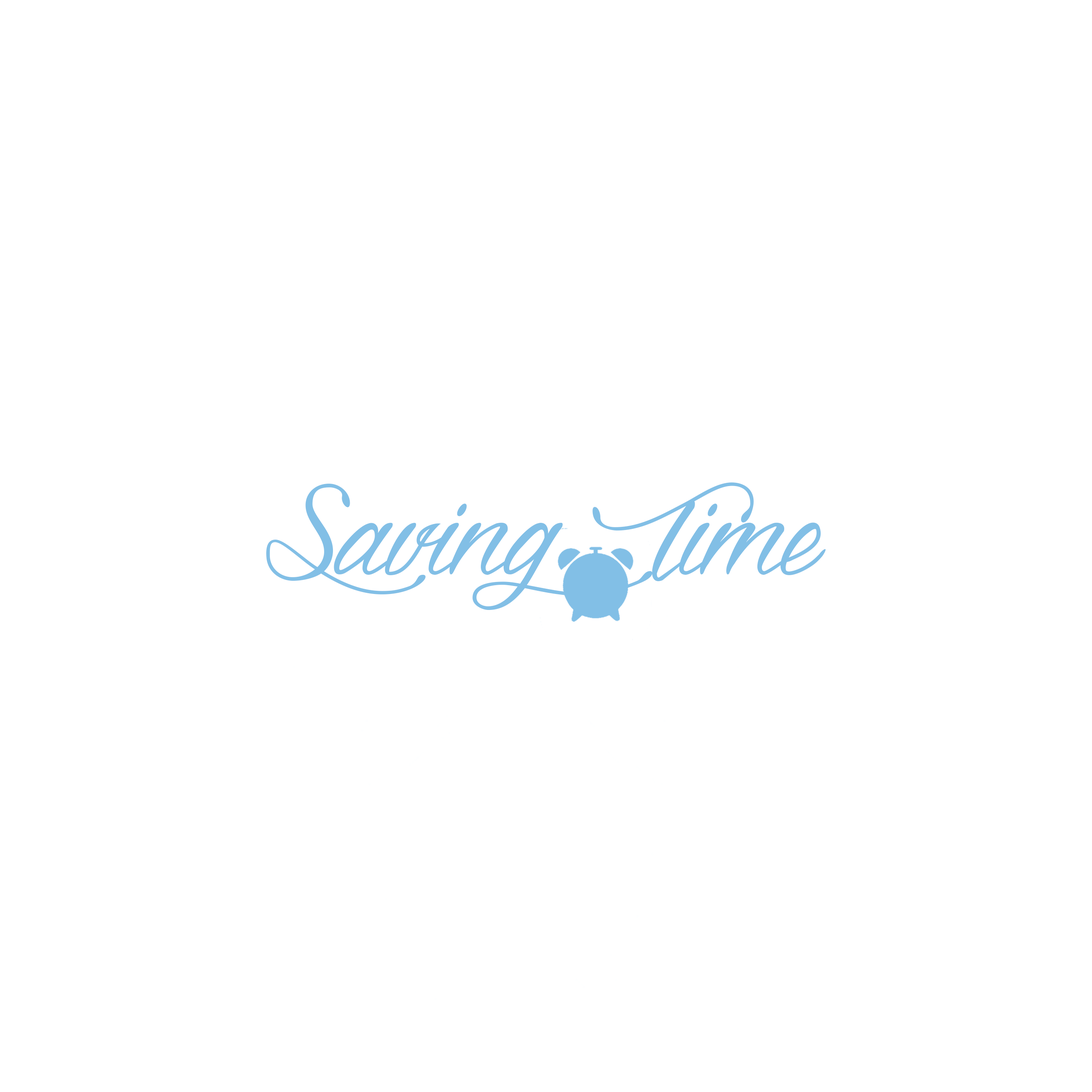
<style>
.page{position:relative;width:1092px;height:1092px;background:#ffffff}
.page>*{position:absolute;margin:0}
.t1{font:279.8px "DragonisComing";color:#82bfe6}
</style>
<div class="page">
<p class="t1" style="left:266px;top:482px;width:560px;height:128px">Saving  Time</p>
</div>
